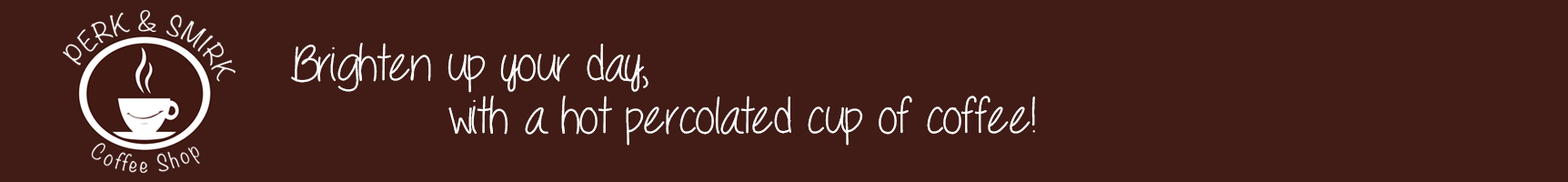
<style>
.page{position:relative;width:1568px;height:182px;background:#411b15}
.page>*{position:absolute;margin:0}
.t1{font:53.1px/53.1px "Seriously";color:#ffffff}
</style>
<div class="page">
<p class="t1" style="left:291px;top:43px;width:744px;height:103px">Brighten up your day,<br>          with a hot percolated cup of coffee!</p>
</div>
